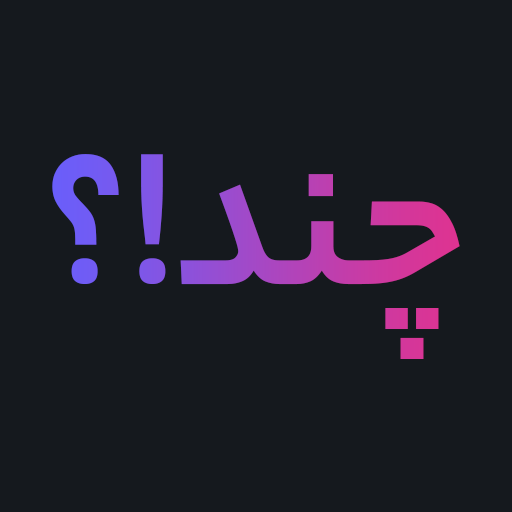
<style>
.page{position:relative;width:512px;height:512px;background:#15191e}
.page>*{position:absolute;margin:0}
.t1{font:213.6px "YekanBakhFaNum-Bold";letter-spacing:-0.01em}
</style>
<div class="page">
<p class="t1" style="left:52px;top:154px;width:408px;height:205px">چند!؟</p>
</div>
